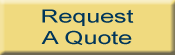
<style>
.page{position:relative;width:175px;height:55px;background:#f0da7f}
.page>*{position:absolute;margin:0}
.t1{font:18px "ArialMT";color:#00355a;scale:1.39 1}
</style>
<div class="page">
<p class="t1" style="left:41px;top:9px;width:93px;height:36px;text-align:center">Request<br>A Quote</p>
</div>
